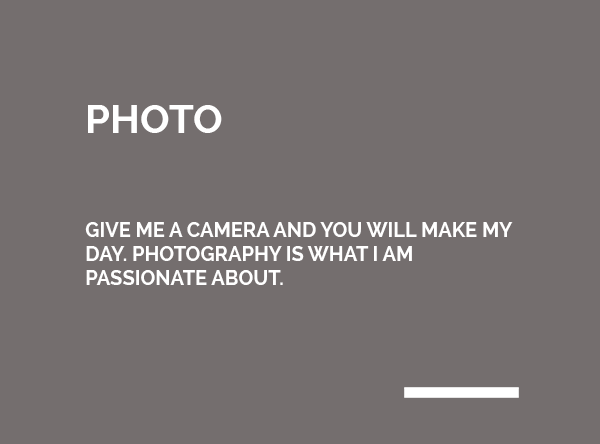
<style>
.page{position:relative;width:600px;height:444px;background:#746e6e}
.page>*{position:absolute;margin:0}
.t1{font:40px "Raleway-Bold";color:#ffffff;text-transform:uppercase}
.t2{font:20px "Raleway-Bold";color:#ffffff;text-transform:uppercase}
</style>
<div class="page">
<p class="t1" style="left:88px;top:105px;width:134px;height:28px">Photo</p>
<p class="t2" style="left:85px;top:222px;width:428px;height:63px">Give me a camera and you will make my day. photography is what i am passionate about.</p>
</div>
